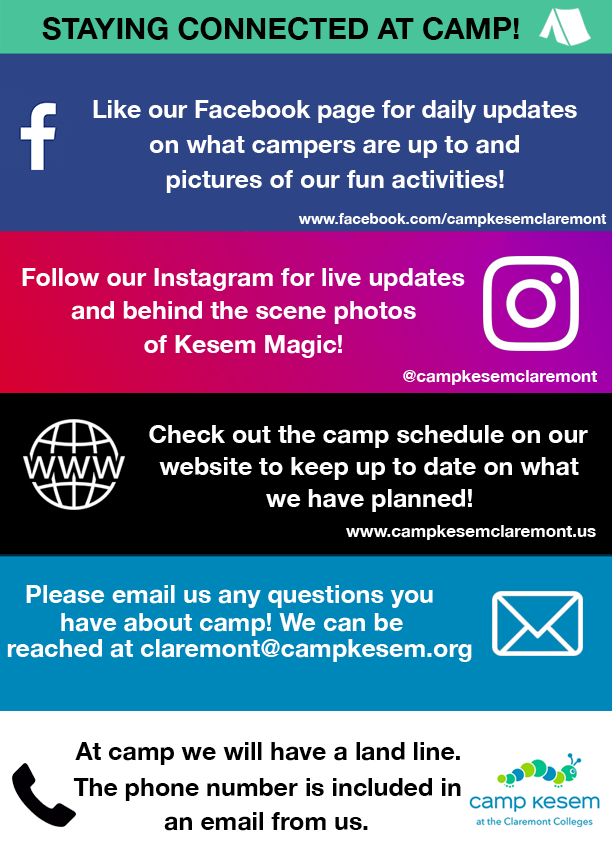
<style>
.page{position:relative;width:612px;height:864px;background:#ffffff}
.page>*{position:absolute;margin:0}
.t1{font:30px "HelveticaNeue-Bold";color:#000000}
.t2{font:24.7px "HelveticaNeue-Bold";color:#ffffff}
.t3{font:25px "HelveticaNeue-Bold";color:#ffffff}
.t4{font:15px "HelveticaNeue-Bold";color:#ffffff}
.t5{font:17px "HelveticaNeue-Bold";color:#ffffff}
.t6{font:25px "HelveticaNeue-Bold";color:#000000}
</style>
<div class="page">
<p class="t1" style="left:42px;top:17px;width:477px;height:23px">STAYING CONNECTED AT CAMP!</p>
<p class="t2" style="left:93px;top:100px;width:484px;height:23px">Like our Facebook page for daily updates</p>
<p class="t3" style="left:149px;top:135px;width:370px;height:23px">on what campers are up to and</p>
<p class="t3" style="left:166px;top:170px;width:338px;height:23px">pictures of our fun activities!</p>
<p class="t4" style="left:298px;top:213px;width:309px;height:14px">www.facebook.com/campkesemclaremont</p>
<p class="t3" style="left:22px;top:268px;width:443px;height:23px">Follow our Instagram for live updates</p>
<p class="t3" style="left:71px;top:301px;width:345px;height:23px">and behind the scene photos</p>
<p class="t3" style="left:144px;top:335px;width:198px;height:23px">of Kesem Magic!</p>
<p class="t5" style="left:403px;top:370px;width:194px;height:15px">@campkesemclaremont</p>
<p class="t3" style="left:149px;top:425px;width:439px;height:23px">Check out the camp schedule on our</p>
<p class="t3" style="left:159px;top:457px;width:420px;height:23px">website to keep up to date on what</p>
<p class="t3" style="left:266px;top:489px;width:206px;height:23px">we have planned!</p>
<p class="t5" style="left:346px;top:525px;width:250px;height:15px">www.campkesemclaremont.us</p>
<p class="t3" style="left:26px;top:585px;width:407px;height:23px">Please email us any questions you</p>
<p class="t3" style="left:61px;top:613px;width:342px;height:23px">have about camp! We can be</p>
<p class="t3" style="left:7px;top:639px;width:465px;height:23px">reached at claremont@campkesem.org</p>
<p class="t6" style="left:75px;top:742px;width:385px;height:23px">At camp we will have a land line.</p>
<p class="t6" style="left:73px;top:778px;width:388px;height:23px">The phone number is included in</p>
<p class="t6" style="left:164px;top:812px;width:204px;height:19px">an email from us.</p>
</div>
